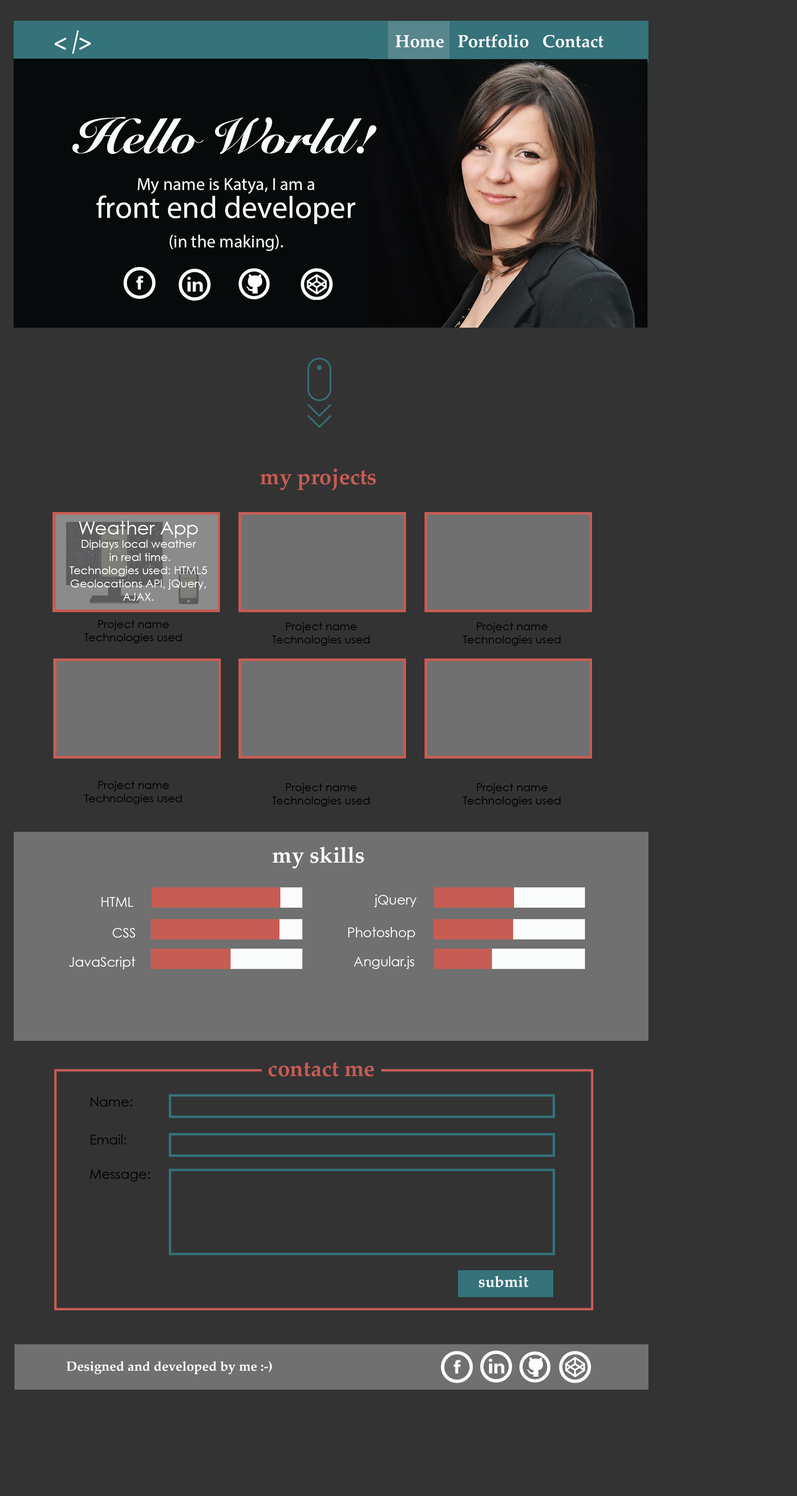
<style>
.page{position:relative;width:797px;height:1496px;background:#333333}
.page>*{position:absolute;margin:0}
.t1{font:26px "Palatino-Bold";color:#fafbfb;scale:0.81 1}
.t2{font:17.6px "Palatino-Bold";color:#fafbfb}
.t3{font:49.4px "SnellRoundhand-Black";color:#fafbfb}
.t4{font:17.6px "MyriadPro-Regular";color:#fafbfb}
.t5{font:17.6px "CenturyGothic";color:#fafbfb}
.t6{font:31.3px/27.8px "MyriadPro-Regular";color:#fafbfb}
.t7{font:17.6px/27.8px "MyriadPro-Regular";color:#fafbfb}
.t8{font:22px "Palatino-Bold";color:#c75c54}
.t9{font:11px "CenturyGothic";color:#ffffff}
.t10{font:18.5px "CenturyGothic";color:#ffffff}
.t11{font:11px "CenturyGothic";color:#000000}
.t12{font:22px "Palatino-Bold";color:#fafbfb}
.t13{font:13.2px "CenturyGothic";color:#ffffff}
.t14{font:13.2px "CenturyGothic";color:#000000}
.t15{font:15.4px "Palatino-Bold";color:#ffffff}
.t16{font:13.2px "Palatino-Bold";color:#ffffff}
</style>
<div class="page">
<p class="t1" style="left:55px;top:30px;width:36px;height:24px">&lt; /&gt;</p>
<p class="t2" style="left:396px;top:34px;width:208px;height:14px">Home   Portfolio   Contact</p>
<p class="t3" style="left:72px;top:117px;width:305px;height:37px">Hello World!</p>
<p class="t4" style="left:97px;top:178px;width:258px;height:73px;text-align:center"><span class="t5"><br></span>My name is Katya, I am a<br><span class="t6">front end developer <br></span><span class="t7">(in the making).</span></p>
<p class="t8" style="left:260px;top:468px;width:116px;height:22px">my projects</p>
<p class="t9" style="left:69px;top:521px;width:138px;height:80px;text-align:center"><span class="t10">Weather App<br></span>Diplays local weather<br> in real time.<br>Technologies used: HTML5 Geolocations API, jQuery, AJAX.</p>
<p class="t11" style="left:84px;top:620px;width:98px;height:23px;text-align:center">Project name<br>Technologies used</p>
<p class="t11" style="left:272px;top:622px;width:98px;height:24px;text-align:center">Project name<br>Technologies used</p>
<p class="t11" style="left:463px;top:622px;width:98px;height:24px;text-align:center">Project name<br>Technologies used</p>
<p class="t11" style="left:84px;top:781px;width:98px;height:23px;text-align:center">Project name<br>Technologies used</p>
<p class="t11" style="left:272px;top:783px;width:98px;height:23px;text-align:center">Project name<br>Technologies used</p>
<p class="t11" style="left:463px;top:783px;width:98px;height:23px;text-align:center">Project name<br>Technologies used</p>
<p class="t12" style="left:273px;top:847px;width:91px;height:22px">my skills</p>
<p class="t13" style="left:101px;top:897px;width:33px;height:10px">HTML</p>
<p class="t13" style="left:374px;top:894px;width:43px;height:13px">jQuery</p>
<p class="t13" style="left:112px;top:928px;width:23px;height:9px">CSS</p>
<p class="t13" style="left:348px;top:927px;width:67px;height:13px">Photoshop</p>
<p class="t13" style="left:69px;top:956px;width:66px;height:13px">JavaScript</p>
<p class="t13" style="left:354px;top:956px;width:60px;height:13px">Angular.js</p>
<p class="t8" style="left:269px;top:1062px;width:105px;height:14px">contact me</p>
<p class="t14" style="left:90px;top:1097px;width:42px;height:9px">Name:</p>
<p class="t14" style="left:90px;top:1134px;width:36px;height:10px">Email:</p>
<p class="t14" style="left:90px;top:1169px;width:60px;height:12px">Message:</p>
<p class="t15" style="left:479px;top:1275px;width:50px;height:12px">submit</p>
<p class="t16" style="left:67px;top:1361px;width:205px;height:13px">Designed and developed by me :-)</p>
</div>
